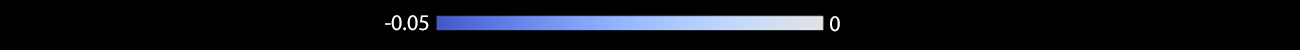
<style>
.page{position:relative;width:1300px;height:50px;background:#000000}
.page>*{position:absolute;margin:0}
.t1{font:22.2px "MyriadPro-Regular";color:#ffffff}
</style>
<div class="page">
<p class="t1" style="left:385px;top:15px;width:44px;height:16px">-0.05</p>
<p class="t1" style="left:830px;top:16px;width:10px;height:16px">0</p>
</div>
